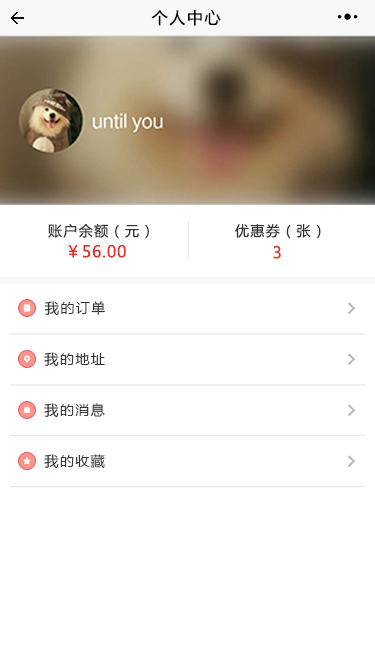
<style>
.page{position:relative;width:375px;height:667px;background:#ffffff}
.page>*{position:absolute;margin:0}
.t1{font:16px "MicrosoftYaHei";letter-spacing:0.1em;color:#020202}
.t2{font:14px "MicrosoftYaHei";letter-spacing:0.1em;color:#333333}
.t3{font:16px "MicrosoftYaHei";letter-spacing:0.05em;color:#e02f25}
</style>
<div class="page">
<p class="t1" style="left:151px;top:9px;width:70px;height:17px">个人中心</p>
<p class="t2" style="left:48px;top:223px;width:101px;height:16px">账户余额（元）</p>
<p class="t2" style="left:235px;top:224px;width:86px;height:15px">优惠券（张）</p>
<p class="t3" style="left:68px;top:245px;width:58px;height:13px">￥56.00</p>
<p class="t3" style="left:273px;top:245px;width:8px;height:14px">3</p>
<p class="t2" style="left:44px;top:301px;width:61px;height:15px">我的订单</p>
<p class="t2" style="left:44px;top:352px;width:61px;height:15px">我的地址</p>
<p class="t2" style="left:44px;top:403px;width:61px;height:15px">我的消息</p>
<p class="t2" style="left:44px;top:454px;width:61px;height:15px">我的收藏</p>
</div>
